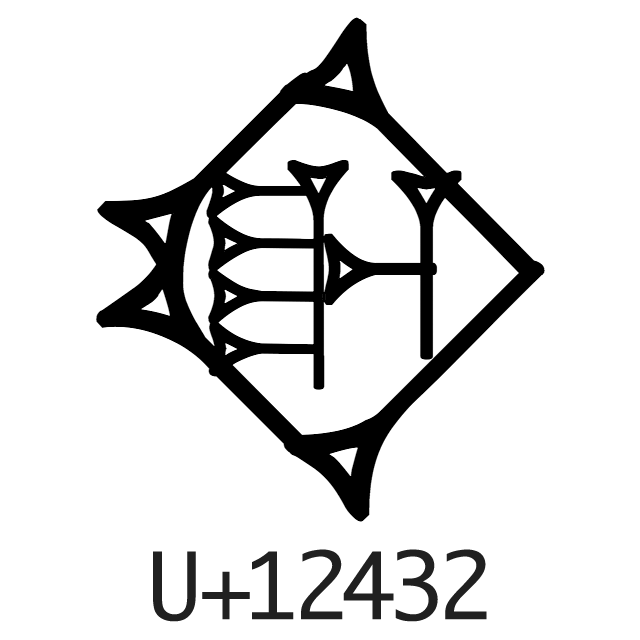
<style>
.page{position:relative;width:640px;height:640px;background:#ffffff}
.page>*{position:absolute;margin:0}
.t1{font:89.2px "Monaco";color:#202020}
</style>
<div class="page">
<p class="t1" style="left:153px;top:549px;width:334px;height:73px">U+12432</p>
</div>
